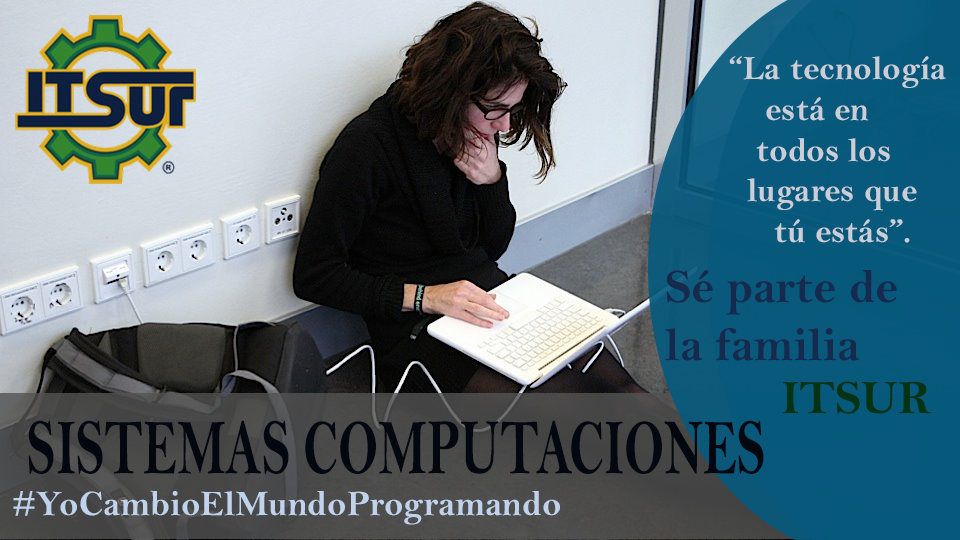
<style>
.page{position:relative;width:960px;height:540px}
.page>*{position:absolute;margin:0}
.t1{font:34px "BellMTBold";color:#c9ced7}
.t2{font:79.2px "BellMTBold";color:#020710;scale:0.66 1}
</style>
<div class="page">
<p class="t1" style="left:729px;top:56px;width:217px;height:187px">“La tecnología <br>    está en<br>   todos los <br>  lugares que <br>     tú estás”.</p>
<p class="t2" style="left:28px;top:420px;width:736px;height:54px">SISTEMAS COMPUTACIONES</p>
</div>
